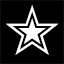
<style>
.page{position:relative;width:64px;height:64px;background:#000000}
.page>*{position:absolute;margin:0}
.t1{font:71.5px "SegoeUISymbol";color:#ffffff}
</style>
<div class="page">
<p class="t1" style="left:6px;top:5px;width:53px;height:50px">✭</p>
</div>
